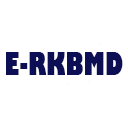
<style>
.page{position:relative;width:128px;height:128px;background:#ffffff}
.page>*{position:absolute;margin:0}
.t1{font:30px "GillSans-UltraBoldCondensed";color:#0c0f53}
</style>
<div class="page">
<p class="t1" style="left:6px;top:52px;width:117px;height:23px">E-RKBMD</p>
</div>
